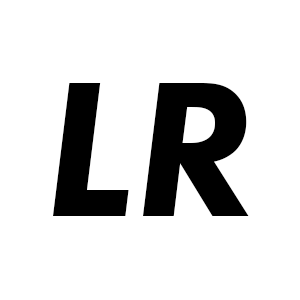
<style>
.page{position:relative;width:300px;height:300px;background:#ffffff}
.page>*{position:absolute;margin:0}
.t1{font:200px "FuturaPT-HeavyObl";color:#000000}
</style>
<div class="page">
<p class="t1" style="left:53px;top:83px;width:196px;height:133px">LR</p>
</div>
